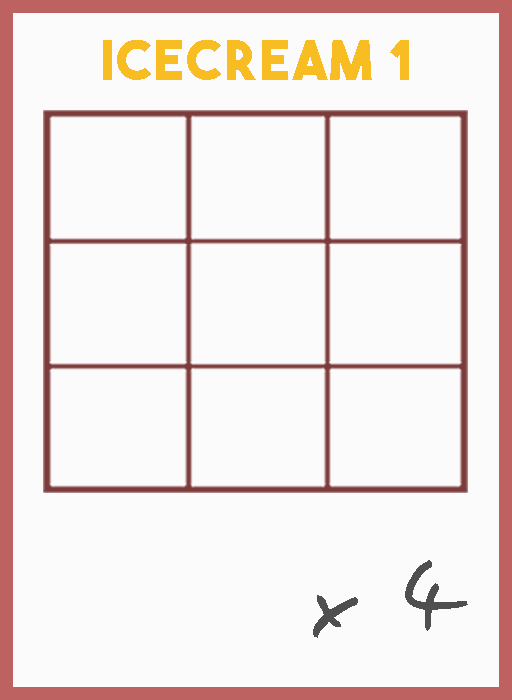
<style>
.page{position:relative;width:512px;height:700px;background:#fbfbfb}
.page>*{position:absolute;margin:0}
.t1{font:54.5px "TheBoldFont";letter-spacing:0.05em;color:#f7bd22}
.t2{font:106.1px "EasySpeech";letter-spacing:0.05em;color:#4f4f4f}
</style>
<div class="page">
<p class="t1" style="left:103px;top:40px;width:306px;height:40px">Icecream 1</p>
<p class="t2" style="left:313px;top:560px;width:155px;height:78px">x 4</p>
</div>
